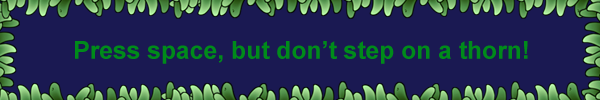
<style>
.page{position:relative;width:600px;height:100px;background:#1a1952}
.page>*{position:absolute;margin:0}
.t1{font:24.7px "Arial-BoldMT";color:#008b1a}
</style>
<div class="page">
<p class="t1" style="left:75px;top:41px;width:453px;height:23px">Press space, but don’t step on a thorn!</p>
</div>
